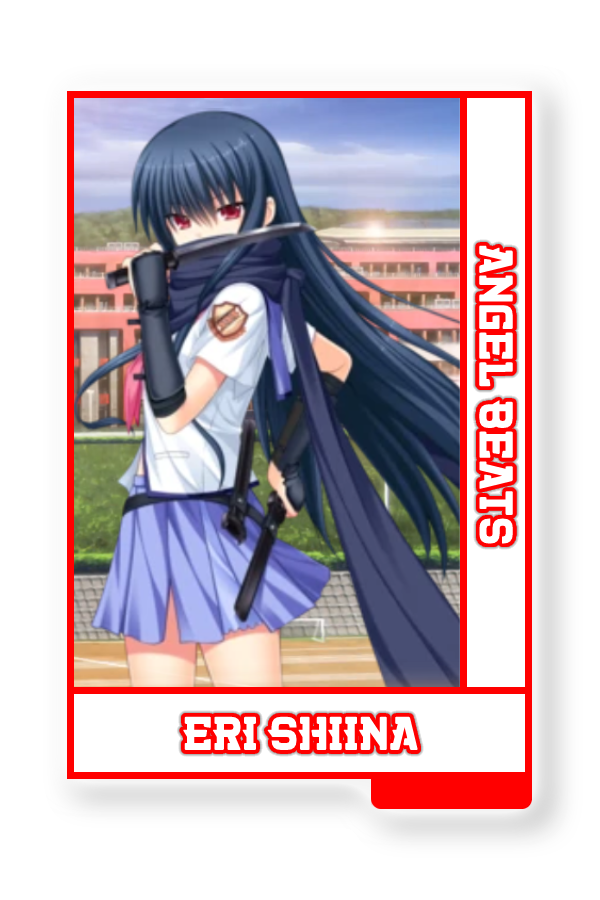
<style>
.page{position:relative;width:600px;height:900px;background:#ffffff}
.page>*{position:absolute;margin:0}
.t1{font:48.8px "KillerCollege";color:#ffffff}
.t2{font:48.6px "KillerCollege";color:#ffffff}
</style>
<div class="page">
<p class="t1" style="left:479px;top:245px;width:34px;height:299px;rotate:90deg">Angel Beats</p>
<p class="t2" style="left:182px;top:716px;width:236px;height:35px">ERI SHIINA</p>
</div>
